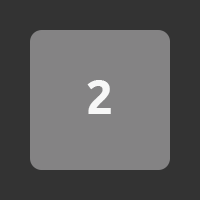
<style>
.page{position:relative;width:200px;height:200px;background:#333333}
.page>*{position:absolute;margin:0}
.t1{font:48px "Ubuntu-Bold";color:#f7f7f7}
</style>
<div class="page">
<p class="t1" style="left:87px;top:80px;width:24px;height:34px">2</p>
</div>
